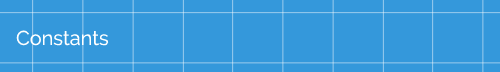
<style>
.page{position:relative;width:500px;height:72px;background:#3498db}
.page>*{position:absolute;margin:0}
.t1{font:20px "Raleway-Regular";color:#ffffff}
</style>
<div class="page">
<p class="t1" style="left:16px;top:30px;width:93px;height:16px">Constants</p>
</div>
